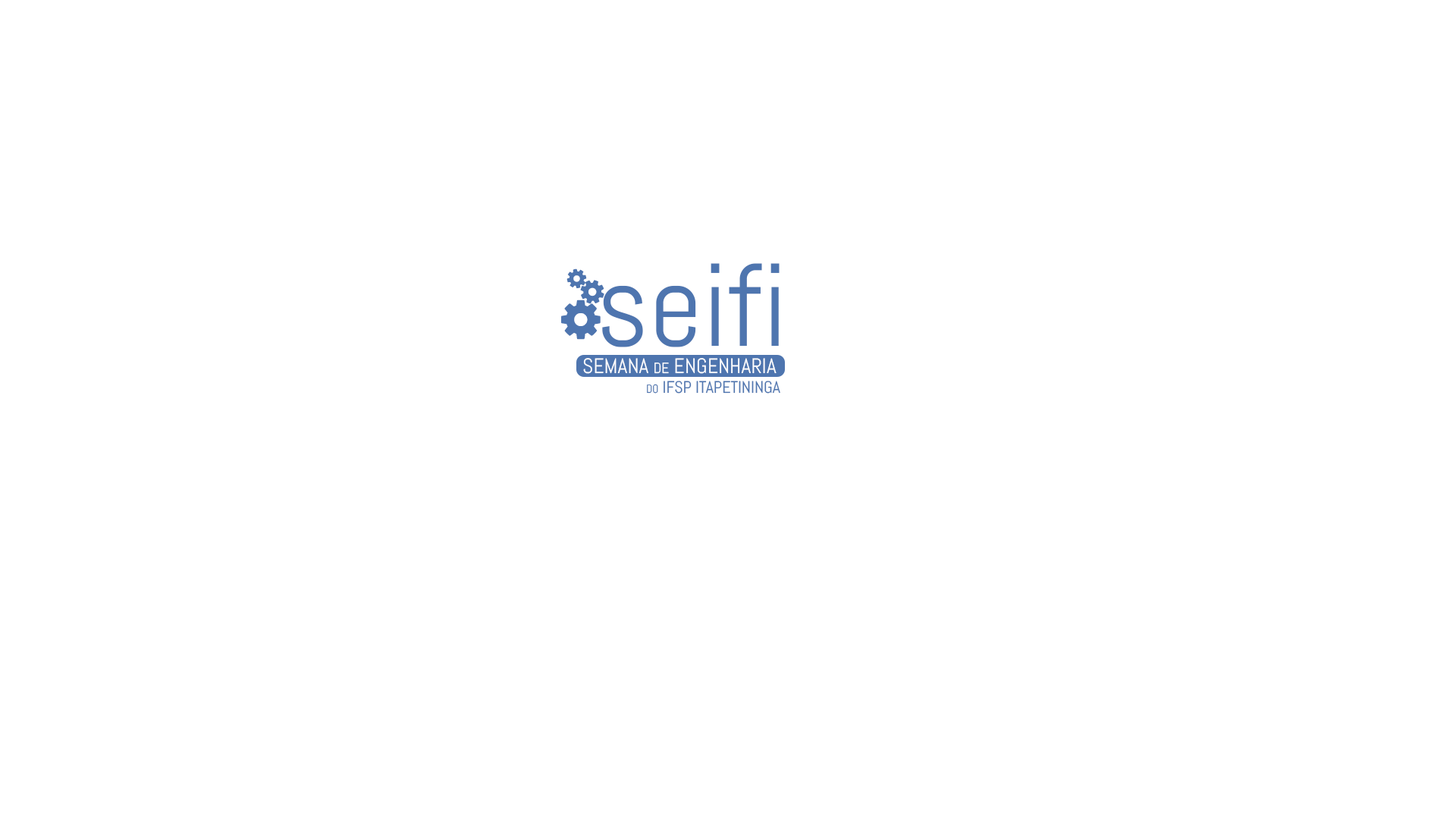
<style>
.page{position:relative;width:1456px;height:819px;background:#ffffff}
.page>*{position:absolute;margin:0}
.t1{font:117.6px "Abel-Regular";color:#4e75af}
.t2{font:21px "Abel-Regular";color:#ffffff;font-variant:small-caps}
.t3{font:16.7px "Abel-Regular";color:#4e75af;font-variant:small-caps}
</style>
<div class="page">
<p class="t1" style="left:602px;top:263px;width:178px;height:84px">seifi</p>
<p class="t2" style="left:583px;top:358px;width:194px;height:16px">SEMANA de ENGENHARIA</p>
<p class="t3" style="left:647px;top:381px;width:133px;height:13px">do IFSP ITAPETININGA</p>
</div>
